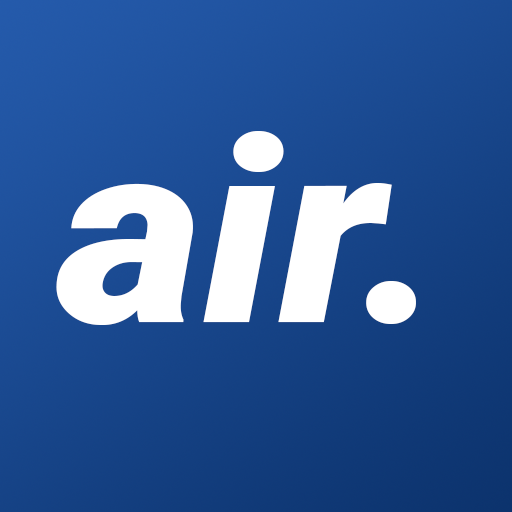
<style>
.page{position:relative;width:512px;height:512px}
.page>*{position:absolute;margin:0}
.t1{font:256.8px "Roboto-BlackItalic";color:#ffffff;scale:1.1 1}
</style>
<div class="page">
<p class="t1" style="left:56px;top:131px;width:360px;height:194px">air.</p>
</div>
